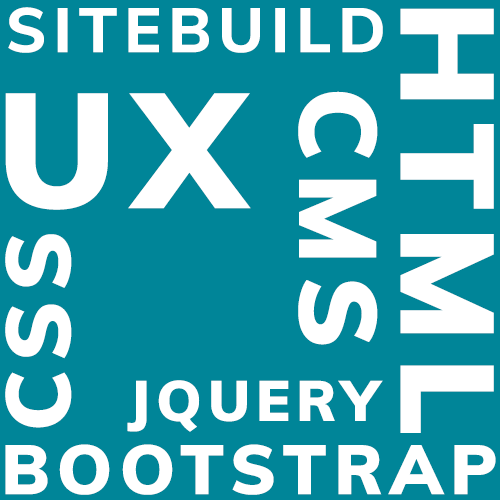
<style>
.page{position:relative;width:500px;height:500px;background:#008598}
.page>*{position:absolute;margin:0}
.t1{font:62.3px "Muli-ExtraBold";letter-spacing:0.105em;color:#ffffff;text-transform:uppercase}
.t2{font:130.5px "Muli-Black";letter-spacing:0.105em;color:#ffffff;text-transform:uppercase;scale:1.06 1}
.t3{font:161.3px "Muli-Black";letter-spacing:0.105em;color:#ffffff;text-transform:uppercase}
.t4{font:108.1px "Muli-Black";letter-spacing:0.105em;color:#ffffff;text-transform:uppercase}
.t5{font:90.5px "Muli-Black";letter-spacing:0.105em;color:#ffffff;text-transform:uppercase}
.t6{font:56.5px "Muli-Black";letter-spacing:0.105em;color:#ffffff;text-transform:uppercase}
.t7{font:69.1px "Muli-Black";letter-spacing:0.105em;color:#ffffff;text-transform:uppercase}
</style>
<div class="page">
<p class="t1" style="left:8px;top:7px;width:375px;height:46px">sitebuild</p>
<p class="t2" style="left:400px;top:8px;width:94px;height:425px;rotate:90deg">html</p>
<p class="t3" style="left:5px;top:93px;width:246px;height:117px">ux</p>
<p class="t4" style="left:298px;top:91px;width:80px;height:254px;rotate:90deg">cms</p>
<p class="t5" style="left:5px;top:234px;width:67px;height:194px;rotate:-90deg">css</p>
<p class="t6" style="left:127px;top:380px;width:256px;height:52px">jquery</p>
<p class="t7" style="left:5px;top:444px;width:491px;height:51px">bootstrap</p>
</div>
